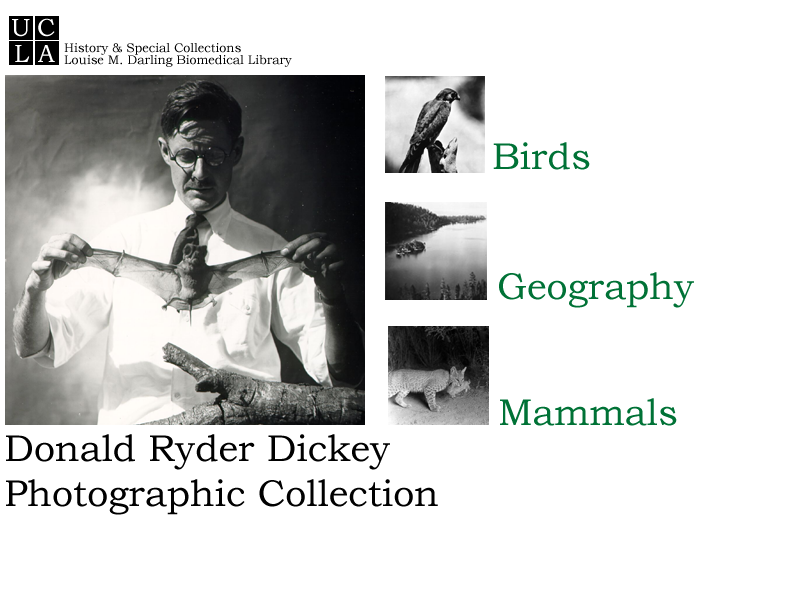
<style>
.page{position:relative;width:800px;height:600px;background:#ffffff}
.page>*{position:absolute;margin:0}
.t1{font:37.5px "BookmanOldStyle";color:#007236}
.t2{font:37.5px "BookmanOldStyle";color:#000000}
</style>
<div class="page">
<p class="t1" style="left:493px;top:142px;width:97px;height:28px">Birds</p>
<p class="t1" style="left:499px;top:272px;width:195px;height:36px">Geography</p>
<p class="t1" style="left:500px;top:398px;width:177px;height:28px">Mammals</p>
<p class="t2" style="left:6px;top:434px;width:432px;height:81px">Donald Ryder Dickey<br>Photographic Collection</p>
</div>
